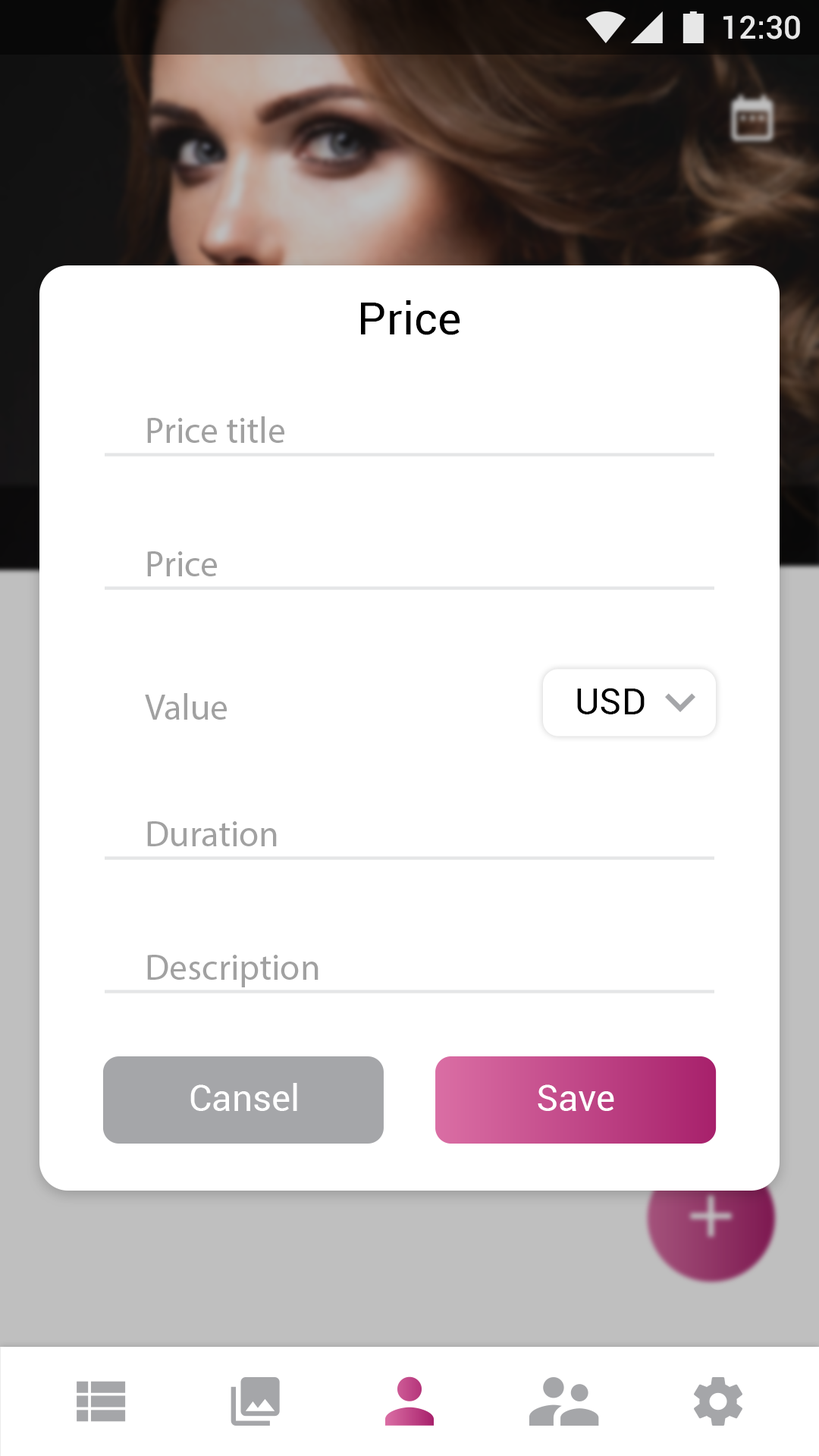
<style>
.page{position:relative;width:819px;height:1456px;background:#ffffff}
.page>*{position:absolute;margin:0}
.t1{font:31.8px "Roboto-Medium";color:#ffffff}
.t2{font:45.5px "Roboto-Regular";color:#000000}
.t3{font:36.4px "MyriadPro-Regular";color:#a1a1a1}
.t4{font:36.4px "Roboto-Regular";color:#000000}
.t5{font:36.4px "Roboto-Regular";color:#ffffff}
</style>
<div class="page">
<p class="t1" style="left:723px;top:15px;width:77px;height:24px">12:30</p>
<p class="t2" style="left:361px;top:300px;width:99px;height:35px">Price</p>
<p class="t3" style="left:147px;top:416px;width:137px;height:27px">Price title</p>
<p class="t3" style="left:147px;top:551px;width:70px;height:25px">Price</p>
<p class="t4" style="left:577px;top:688px;width:68px;height:26px">USD</p>
<p class="t3" style="left:145px;top:693px;width:82px;height:27px">Value</p>
<p class="t3" style="left:147px;top:821px;width:130px;height:25px">Duration</p>
<p class="t3" style="left:147px;top:955px;width:171px;height:32px">Description</p>
<p class="t5" style="left:190px;top:1083px;width:107px;height:28px">Cansel</p>
<p class="t5" style="left:538px;top:1084px;width:76px;height:27px">Save</p>
</div>
